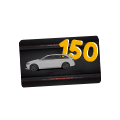
<style>
.page{position:relative;width:120px;height:120px;background:#ffffff}
.page>*{position:absolute;margin:0}
.t1{font:26px "FredokaOne-Regular";color:#ffba00}
</style>
<div class="page">
<p class="t1" style="left:59px;top:39px;width:39px;height:23px;rotate:8deg">150</p>
</div>
